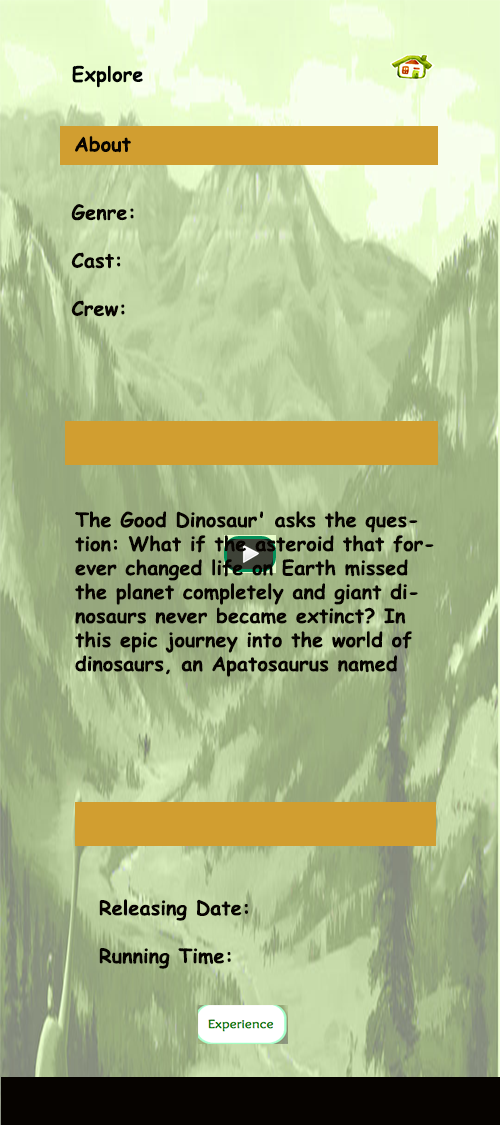
<style>
.page{position:relative;width:500px;height:1125px}
.page>*{position:absolute;margin:0}
.t1{font:20px "ComicSansMS-Bold";color:#000302}
.t2{font:20px "ComicSansMS-Bold";color:#060300}
</style>
<div class="page">
<p class="t1" style="left:72px;top:65px;width:71px;height:23px">Explore</p>
<p class="t2" style="left:75px;top:135px;width:56px;height:18px">About</p>
<p class="t2" style="left:71px;top:204px;width:63px;height:113px">Genre:<br><br>Cast:<br><br>Crew:</p>
<p class="t2" style="left:75px;top:511px;width:359px;height:166px">The Good Dinosaur' asks the question: What if the asteroid that forever changed life on Earth missed the planet completely and giant dinosaurs never became extinct? In this epic journey into the world of dinosaurs, an Apatosaurus named Arlo makes an unlikely human friend. While traveling through a harsh and mysterious landscape, Arlo learns the power of confronting his fears and discovers what he is truly capable of.</p>
<p class="t2" style="left:99px;top:899px;width:149px;height:70px">Releasing Date:<br><br>Running Time:</p>
</div>
